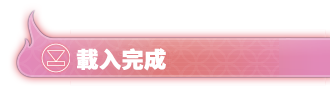
<style>
.page{position:relative;width:330px;height:90px;background:#ffffff}
.page>*{position:absolute;margin:0}
.t1{font:22px "SourceHanSansCN-Heavy";color:#ffffff;font-weight:bold}
</style>
<div class="page">
<p class="t1" style="left:76px;top:48px;width:90px;height:23px">載入完成</p>
</div>
